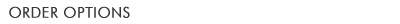
<style>
.page{position:relative;width:400px;height:24px;background:#ffffff}
.page>*{position:absolute;margin:0}
.t1{font:14.7px "FuturaBT-Light";letter-spacing:0.025em;color:#363636;text-transform:uppercase;font-weight:bold}
</style>
<div class="page">
<p class="t1" style="left:9px;top:6px;width:121px;height:12px">ORDER OPTIONS</p>
</div>
